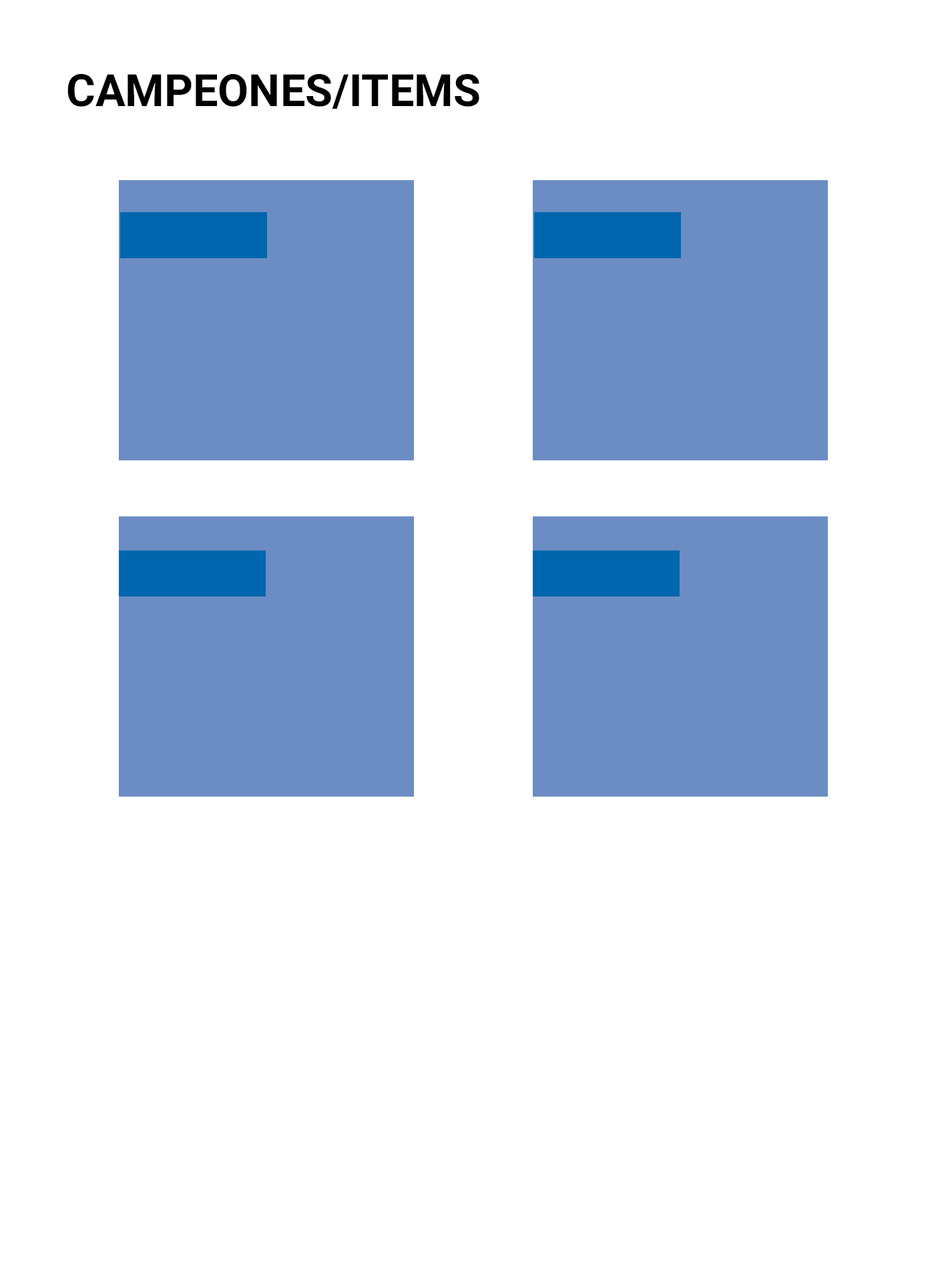
<style>
.page{position:relative;width:946px;height:1261px;background:#ffffff}
.page>*{position:absolute;margin:0}
.t1{font:44.5px "Roboto-Bold";color:#000000}
</style>
<div class="page">
<p class="t1" style="left:67px;top:73px;width:412px;height:36px">CAMPEONES/ITEMS</p>
</div>
